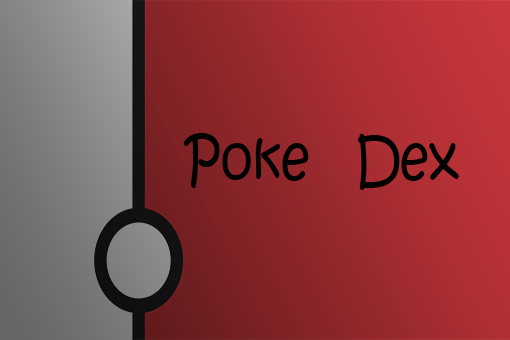
<style>
.page{position:relative;width:510px;height:340px}
.page>*{position:absolute;margin:0}
.t1{font:60px "KristenITC-Regular";color:#000000;scale:0.84 1}
</style>
<div class="page">
<p class="t1" style="left:183px;top:133px;width:276px;height:57px">Poke   Dex</p>
</div>
